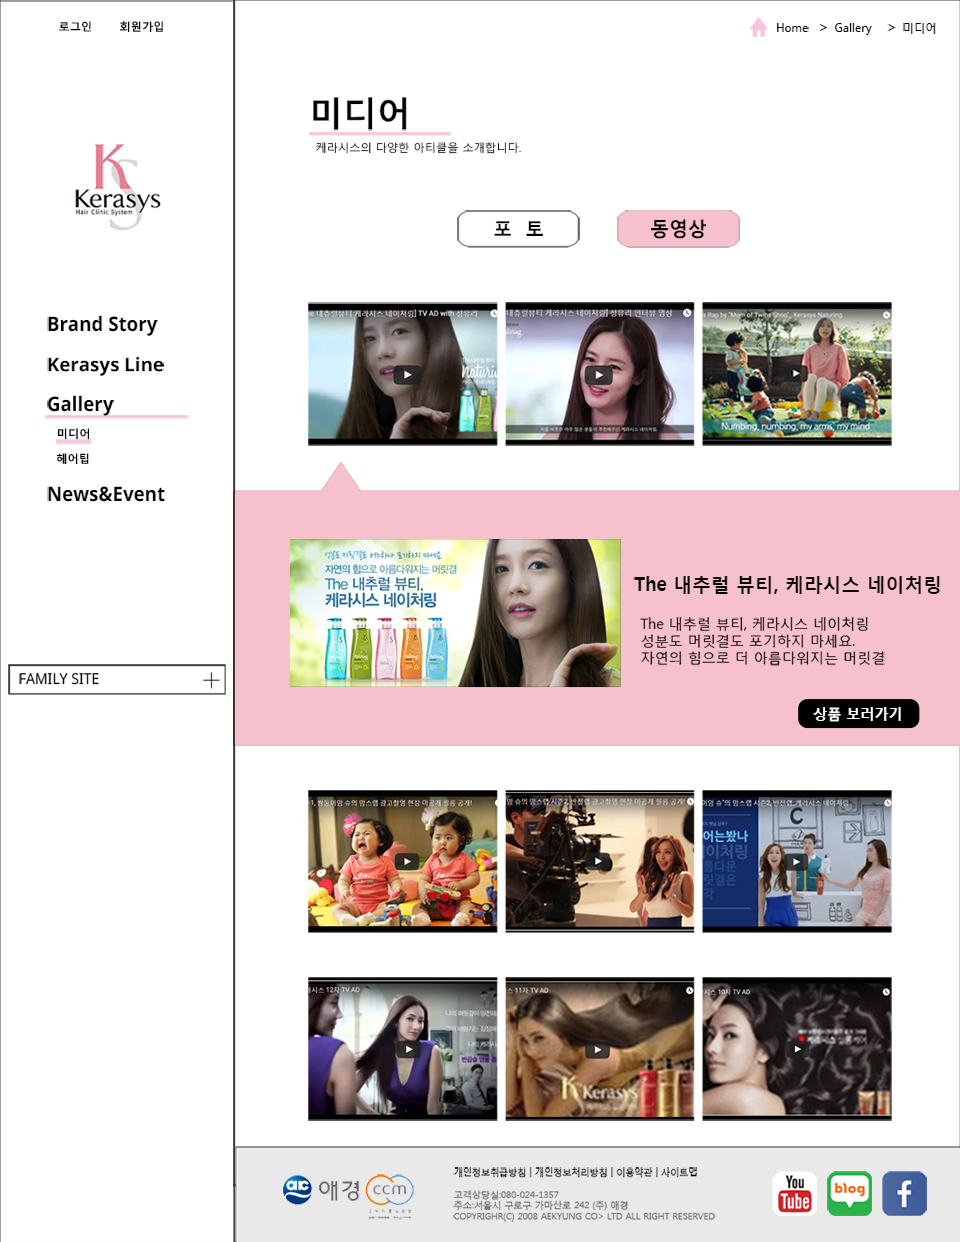
<style>
.page{position:relative;width:960px;height:1242px;background:#ffffff}
.page>*{position:absolute;margin:0}
.t1{font:11.3px "MalgunGothicBold";color:#000000}
.t2{font:11.2px "NotoSans";color:#000000}
.t3{font:13.9px "MalgunGothicRegular";color:#000000}
.t4{font:11.2px "MalgunGothicRegular";color:#000000}
.t5{font:33.7px "MalgunGothicBold";color:#000000}
.t6{font:18.8px "MalgunGothicBold";color:#000000}
.t7{font:18.8px "NotoSans-Bold";color:#000000}
.t8{font:18.7px "MalgunGothicBold";color:#000000}
.t9{font:14.1px "MalgunGothicRegular";color:#000000}
.t10{font:14.1px "NotoSans";color:#000000}
.t11{font:14.1px "MalgunGothicBold";color:#ffffff}
.t12{font:9.1px "MalgunGothicRegular";color:#6e6b6b}
.t13{font:9.1px "MalgunGothicRegular";color:#000000}
</style>
<div class="page">
<p class="t1" style="left:59px;top:21px;width:32px;height:11px">로그인</p>
<p class="t1" style="left:120px;top:21px;width:43px;height:12px">회원가입</p>
<p class="t2" style="left:777px;top:23px;width:32px;height:9px">Home</p>
<p class="t3" style="left:820px;top:24px;width:7px;height:7px">&gt;</p>
<p class="t2" style="left:834px;top:23px;width:38px;height:12px">Gallery</p>
<p class="t3" style="left:887px;top:24px;width:9px;height:7px">&gt;</p>
<p class="t4" style="left:903px;top:23px;width:33px;height:11px">미디어</p>
<p class="t5" style="left:313px;top:97px;width:94px;height:34px">미디어</p>
<p class="t4" style="left:316px;top:142px;width:205px;height:12px">케라시스의 다양한 아티클을 소개합니다.</p>
<p class="t6" style="left:494px;top:221px;width:49px;height:15px">포  토</p>
<p class="t6" style="left:651px;top:219px;width:55px;height:20px">동영상</p>
<p class="t7" style="left:47px;top:315px;width:111px;height:21px">Brand Story</p>
<p class="t7" style="left:47px;top:356px;width:117px;height:20px">Kerasys Line</p>
<p class="t7" style="left:47px;top:395px;width:67px;height:21px">Gallery</p>
<p class="t1" style="left:57px;top:428px;width:33px;height:12px">미디어</p>
<p class="t1" style="left:56px;top:453px;width:33px;height:12px">헤어팁</p>
<p class="t7" style="left:47px;top:486px;width:118px;height:16px">News&amp;Event</p>
<p class="t8" style="left:633px;top:576px;width:308px;height:18px">The 내추럴 뷰티, 케라시스 네이처링</p>
<p class="t9" style="left:640px;top:617px;width:245px;height:49px">The 내추럴 뷰티, 케라시스 네이처링<br>성분도 머릿결도 포기하지 마세요.<br>자연의 힘으로 더 아름다워지는 머릿결</p>
<p class="t10" style="left:19px;top:673px;width:81px;height:12px">FAMILY SITE</p>
<p class="t11" style="left:813px;top:707px;width:88px;height:15px">상품 보러가기</p>
<p class="t12" style="left:453px;top:1167px;width:263px;height:55px;text-align:justify"><span class="t13">개인정보취급방침 | 개인정보처리방침 | 이용약관 | 사이트맵<br><br></span>고객상당실:080-024-1357<br>주소:서울시 구로구 가마산로 242 (주) 애경<br>COPYRIGHR(C) 2008 AEKYUNG CO&gt; LTD ALL RIGHT RESERVED</p>
</div>
